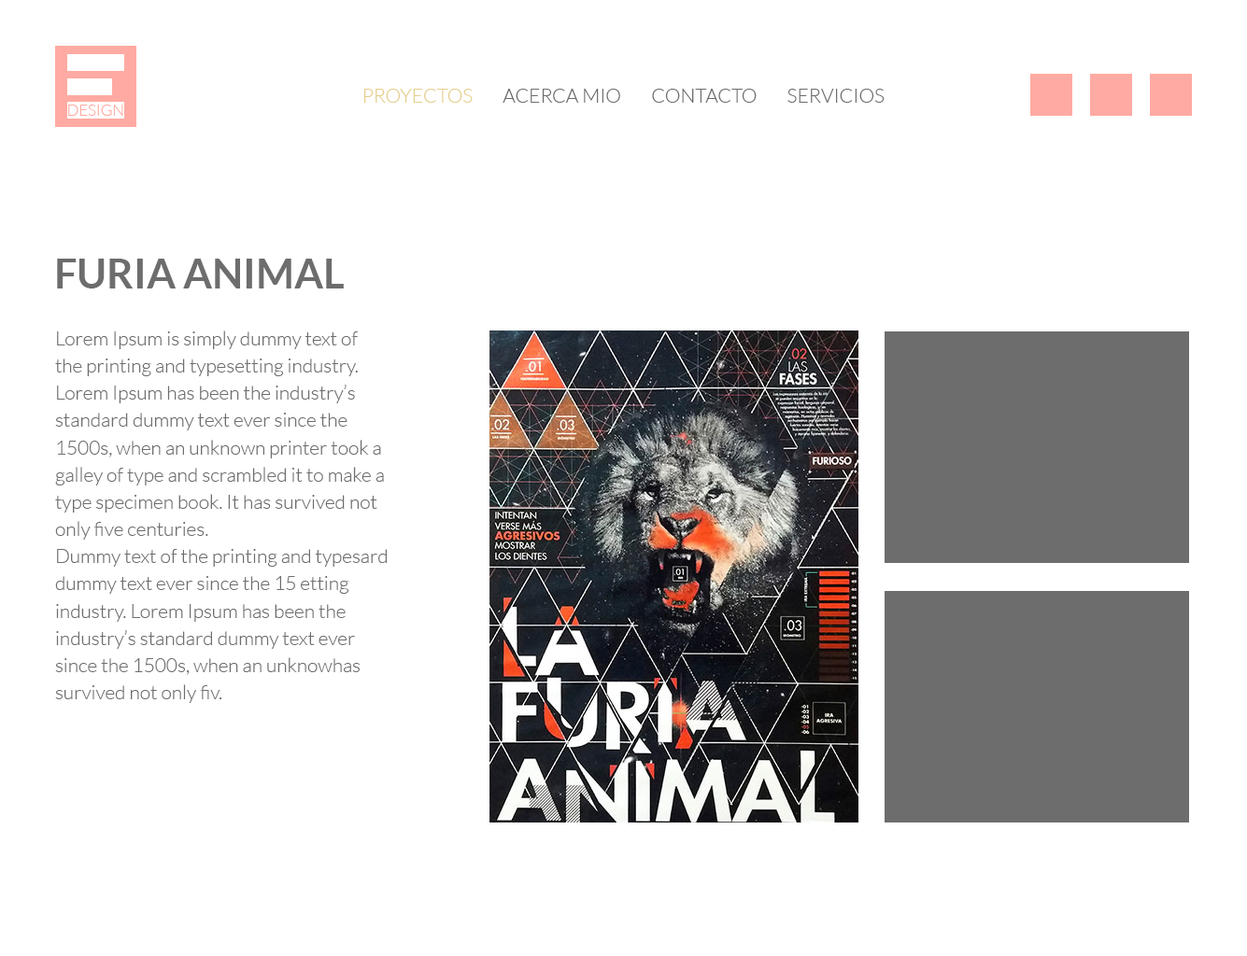
<style>
.page{position:relative;width:1247px;height:956px;background:#ffffff}
.page>*{position:absolute;margin:0}
.t1{font:19.5px "Lato-Light";color:#6d6d6d}
.t2{font:19.5px "Lato-Light";color:#e5cf8c}
.t3{font:40.9px "Lato-Bold";color:#6d6d6d}
.t4{font:19.5px/27.2px "Lato-Light";color:#6d6d6d}
</style>
<div class="page">
<p class="t1" style="left:363px;top:89px;width:521px;height:14px"><span class="t2">PROYECTOS</span>        ACERCA MIO        CONTACTO        SERVICIOS</p>
<p class="t3" style="left:57px;top:259px;width:287px;height:30px">FURIA ANIMAL</p>
<p class="t4" style="left:55px;top:331px;width:332px;height:372px">Lorem Ipsum is simply dummy text of the printing and typesetting industry. Lorem Ipsum has been the industry’s standard dummy text ever since the 1500s, when an unknown printer took a galley of type and scrambled it to make a type specimen book. It has survived not only five centuries.<br>Dummy text of the printing and typesard dummy text ever since the 15 etting industry. Lorem Ipsum has been the industry’s standard dummy text ever since the 1500s, when an unknowhas survived not only fiv.</p>
</div>
